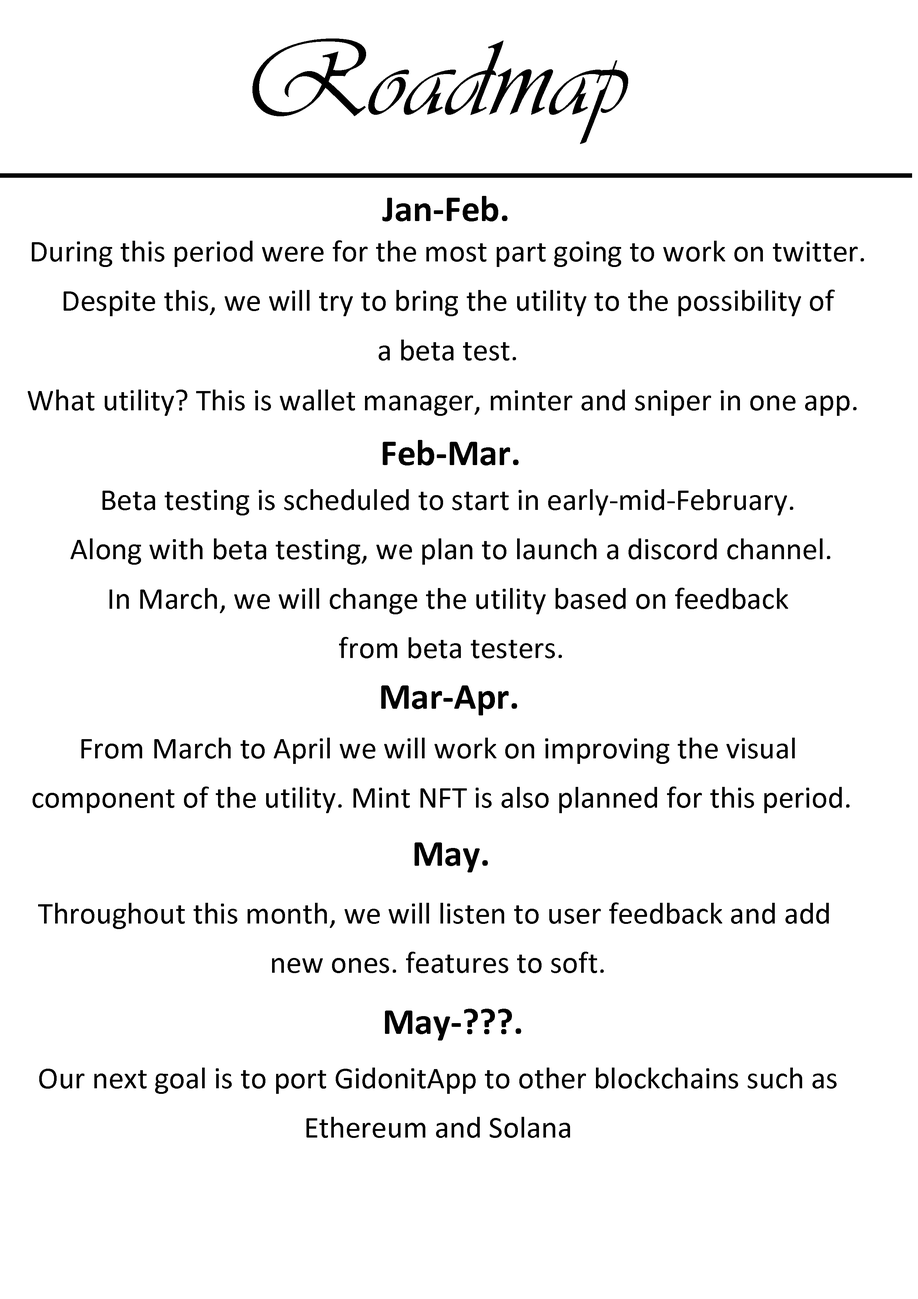
<style>
.page{position:relative;width:918px;height:1299px;background:#ffffff}
.page>*{position:absolute;margin:0}
.t1{font:111.1px "Vivaldii";color:#000000}
.t2{font:37px "Calibri-Bold";color:#000000}
.t3{font:30.9px/49.4px "Calibri";color:#000000}
.t4{font:30.9px "Calibri";color:#000000}
</style>
<div class="page">
<p class="t1" style="left:252px;top:39px;width:376px;height:105px">Roadmap</p>
<p class="t2" style="left:382px;top:196px;width:126px;height:25px">Jan-Feb.</p>
<p class="t3" style="left:32px;top:240px;width:832px;height:121px;text-align:center">During this period were for the most part going to work on twitter. <br>Despite this, we will try to bring the utility to the possibility of <br>a beta test.</p>
<p class="t4" style="left:28px;top:389px;width:829px;height:27px">What utility? This is wallet manager, minter and sniper in one app.</p>
<p class="t2" style="left:383px;top:440px;width:136px;height:25px">Feb-Mar.</p>
<p class="t3" style="left:70px;top:489px;width:760px;height:169px;text-align:center">Beta testing is scheduled to start in early-mid-February. <br>Along with beta testing, we plan to launch a discord channel.<br>In March, we will change the utility based on feedback <br>from beta testers.</p>
<p class="t2" style="left:381px;top:685px;width:136px;height:30px">Mar-Apr.</p>
<p class="t3" style="left:33px;top:737px;width:817px;height:76px;text-align:center">From March to April we will work on improving the visual<br> component of the utility. Mint NFT is also planned for this period.</p>
<p class="t2" style="left:415px;top:842px;width:73px;height:30px">May.</p>
<p class="t3" style="left:38px;top:902px;width:791px;height:71px;text-align:center">Throughout this month, we will listen to user feedback and add <br>new ones. features to soft.</p>
<p class="t2" style="left:385px;top:1008px;width:136px;height:32px">May-???.</p>
<p class="t3" style="left:39px;top:1067px;width:798px;height:71px;text-align:center">Our next goal is to port GidonitApp to other blockchains such as<br>Ethereum and Solana</p>
</div>
